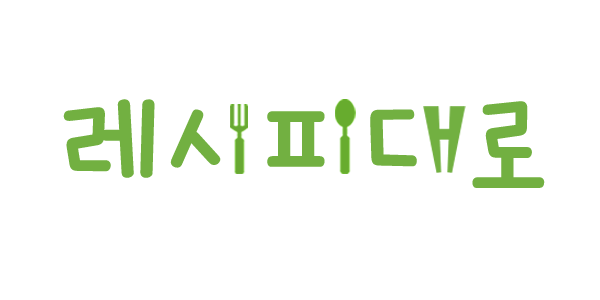
<style>
.page{position:relative;width:600px;height:300px;background:#ffffff}
.page>*{position:absolute;margin:0}
.t1{font:120px "TTRichmangoR";color:#72b041}
</style>
<div class="page">
<p class="t1" style="left:63px;top:99px;width:482px;height:89px">레시피대로</p>
</div>
